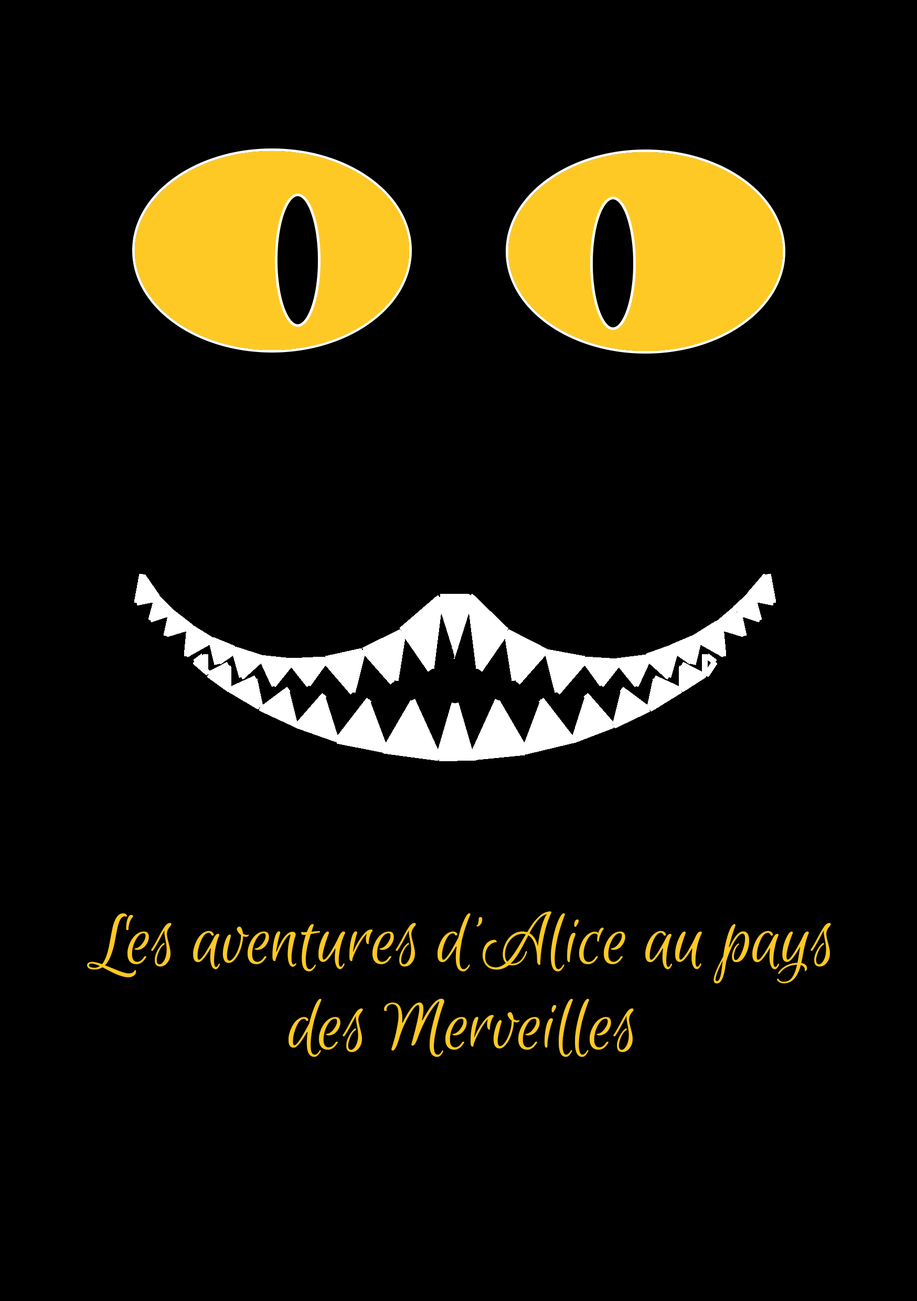
<style>
.page{position:relative;width:917px;height:1301px;background:#000000}
.page>*{position:absolute;margin:0}
.t1{font:78.7px/85.2px "EuphoriaScript-Regular";color:#ffc925}
</style>
<div class="page">
<p class="t1" style="left:87px;top:911px;width:744px;height:146px;text-align:center">Les aventures d’Alice au pays des Merveilles</p>
</div>
